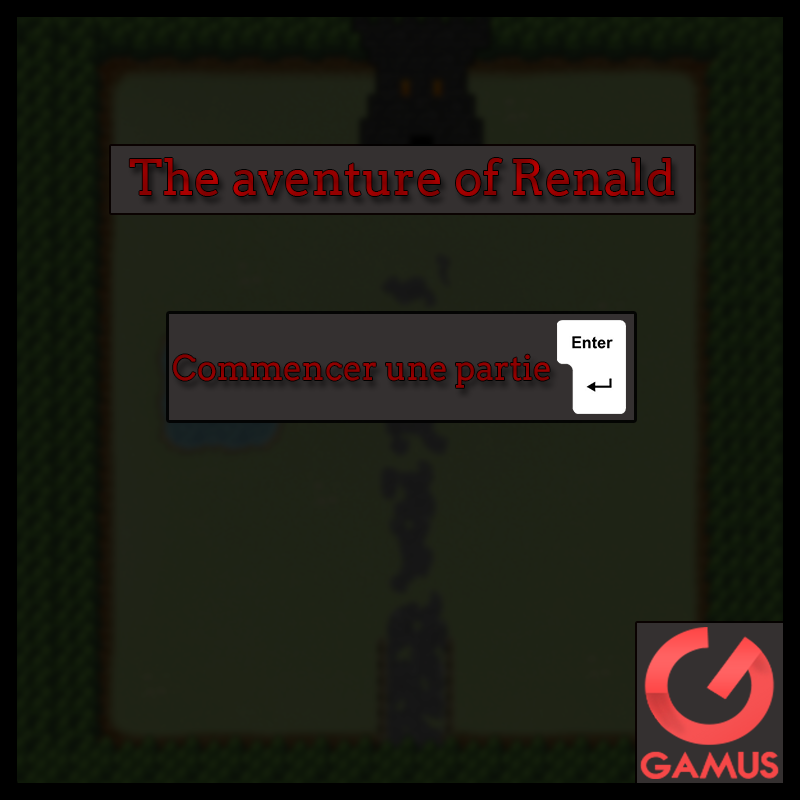
<style>
.page{position:relative;width:800px;height:800px}
.page>*{position:absolute;margin:0}
.t1{font:48px "Arvo";color:#940000}
.t2{font:33.7px "Arvo";color:#8d0000}
</style>
<div class="page">
<p class="t1" style="left:129px;top:158px;width:545px;height:38px">The aventure of Renald</p>
<p class="t2" style="left:173px;top:354px;width:377px;height:34px">Commencer une partie</p>
</div>
